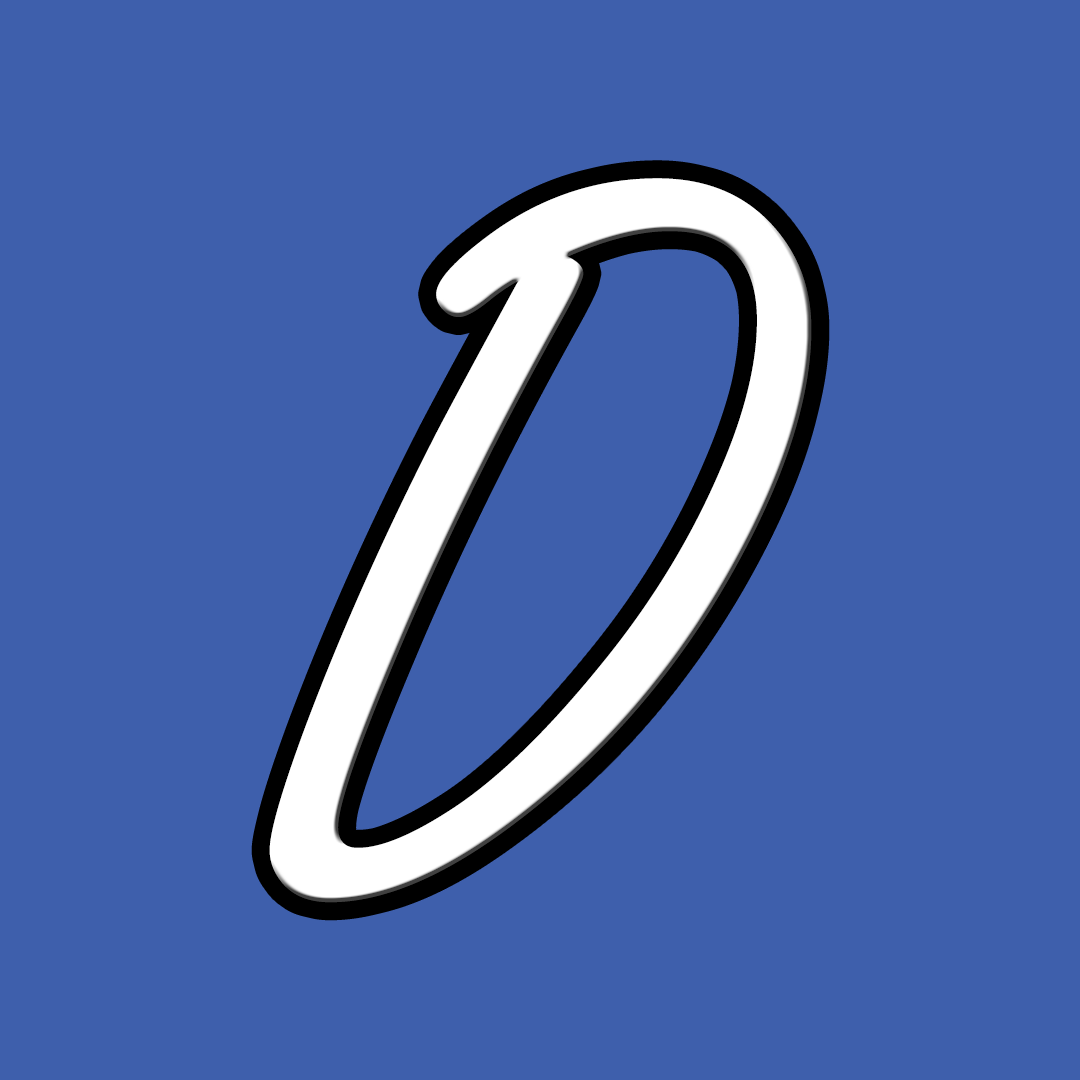
<style>
.page{position:relative;width:1080px;height:1080px;background:#3e5fac}
.page>*{position:absolute;margin:0}
.t1{font:1066.2px "FreestyleScript-Regular";color:#ffffff}
</style>
<div class="page">
<p class="t1" style="left:269px;top:178px;width:543px;height:725px">D</p>
</div>
